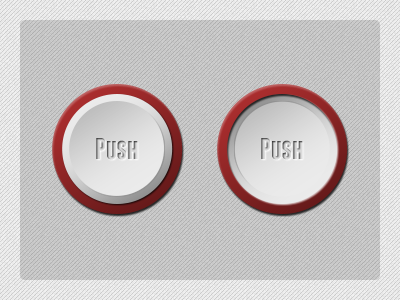
<style>
.page{position:relative;width:400px;height:300px}
.page>*{position:absolute;margin:0}
.t1{font:30px "Franchise-Bold"}
</style>
<div class="page">
<p class="t1" style="left:96px;top:138px;width:42px;height:22px">Push</p>
<p class="t1" style="left:261px;top:138px;width:42px;height:22px">Push</p>
</div>
